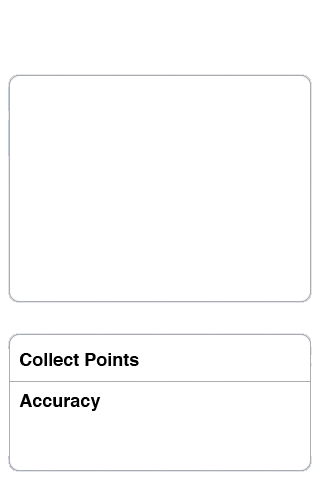
<style>
.page{position:relative;width:320px;height:480px;background:#ffffff}
.page>*{position:absolute;margin:0}
.t1{font:18px "Helvetica-Bold";color:#000000}
</style>
<div class="page">
<p class="t1" style="left:20px;top:353px;width:119px;height:13px">Collect Points</p>
<p class="t1" style="left:19px;top:394px;width:82px;height:17px">Accuracy</p>
</div>
